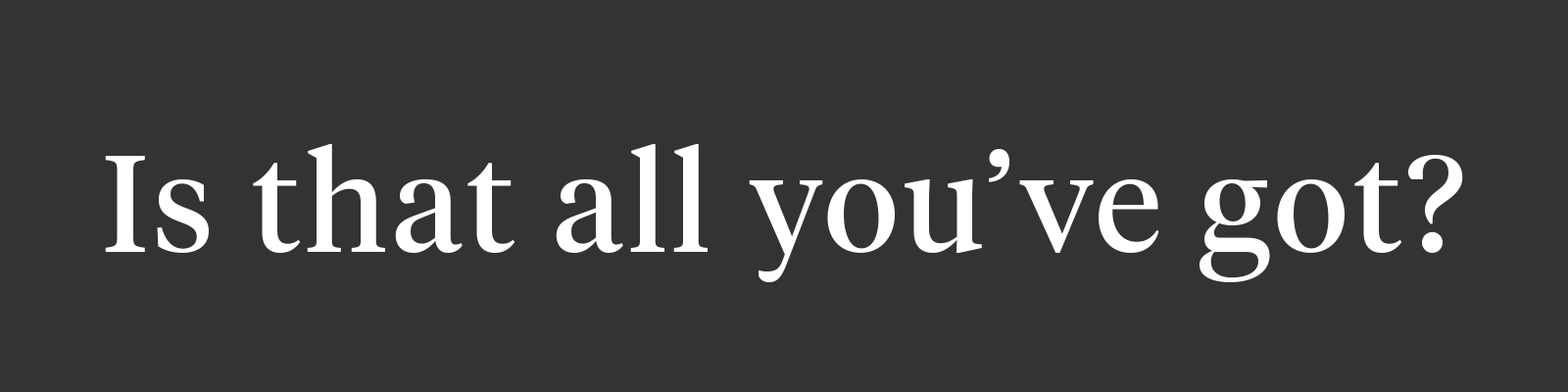
<style>
.page{position:relative;width:1568px;height:392px;background:#333333}
.page>*{position:absolute;margin:0}
.t1{font:137.3px "TiemposHeadline-Regular";letter-spacing:0.04em;color:#ffffff}
</style>
<div class="page">
<p class="t1" style="left:105px;top:144px;width:1358px;height:138px">Is that all you’ve got?</p>
</div>
